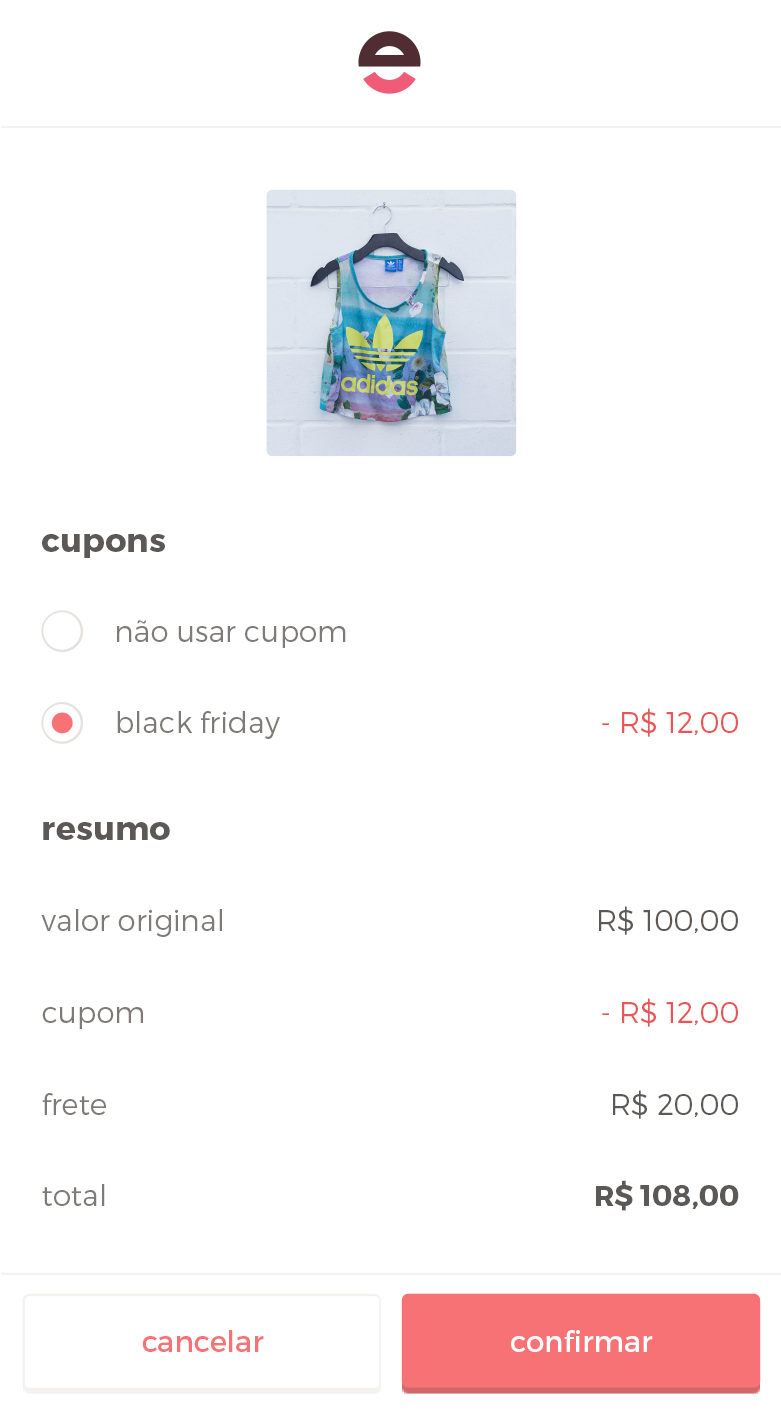
<style>
.page{position:relative;width:781px;height:1413px;background:#ffffff}
.page>*{position:absolute;margin:0}
.t1{font:33.3px "Montserrat-Bold";color:#5b5855}
.t2{font:29.2px "Montserrat-Light";color:#7d7a77}
.t3{font:29.2px "Montserrat-Light";color:#e85657}
.t4{font:29.2px "Montserrat-Light";color:#5b5855}
.t5{font:29.2px "Montserrat-Bold";color:#5b5855}
.t6{font:29.2px "Montserrat-Regular";color:#f77274}
.t7{font:29.2px "Montserrat-Regular";letter-spacing:-0.022em;color:#f77274}
.t8{font:29.2px "Montserrat-Regular";letter-spacing:-0.021em;color:#f77274}
.t9{font:29.2px "Montserrat-Regular";color:#ffffff}
.t10{font:29.2px "Montserrat-Regular";letter-spacing:-0.021em;color:#ffffff}
</style>
<div class="page">
<p class="t1" style="left:42px;top:534px;width:123px;height:24px">cupons</p>
<p class="t2" style="left:117px;top:620px;width:229px;height:28px">não usar cupom</p>
<p class="t2" style="left:117px;top:711px;width:163px;height:28px">black friday</p>
<p class="t3" style="left:602px;top:708px;width:136px;height:29px">- R$ 12,00</p>
<p class="t1" style="left:43px;top:822px;width:127px;height:18px">resumo</p>
<p class="t2" style="left:41px;top:909px;width:181px;height:28px">valor original</p>
<p class="t4" style="left:599px;top:906px;width:139px;height:29px">R$ 100,00</p>
<p class="t3" style="left:602px;top:998px;width:136px;height:29px">- R$ 12,00</p>
<p class="t2" style="left:42px;top:1007px;width:101px;height:22px">cupom</p>
<p class="t2" style="left:42px;top:1093px;width:64px;height:22px">frete</p>
<p class="t4" style="left:613px;top:1090px;width:125px;height:29px">R$ 20,00</p>
<p class="t5" style="left:596px;top:1180px;width:143px;height:31px">R$ 108,00</p>
<p class="t2" style="left:42px;top:1184px;width:63px;height:22px">total</p>
<p class="t6" style="left:142px;top:1330px;width:122px;height:22px"><span class="t7">c</span>an<span class="t8">c</span>elar</p>
<p class="t9" style="left:511px;top:1330px;width:142px;height:22px"><span class="t10">c</span>onﬁrmar</p>
</div>
